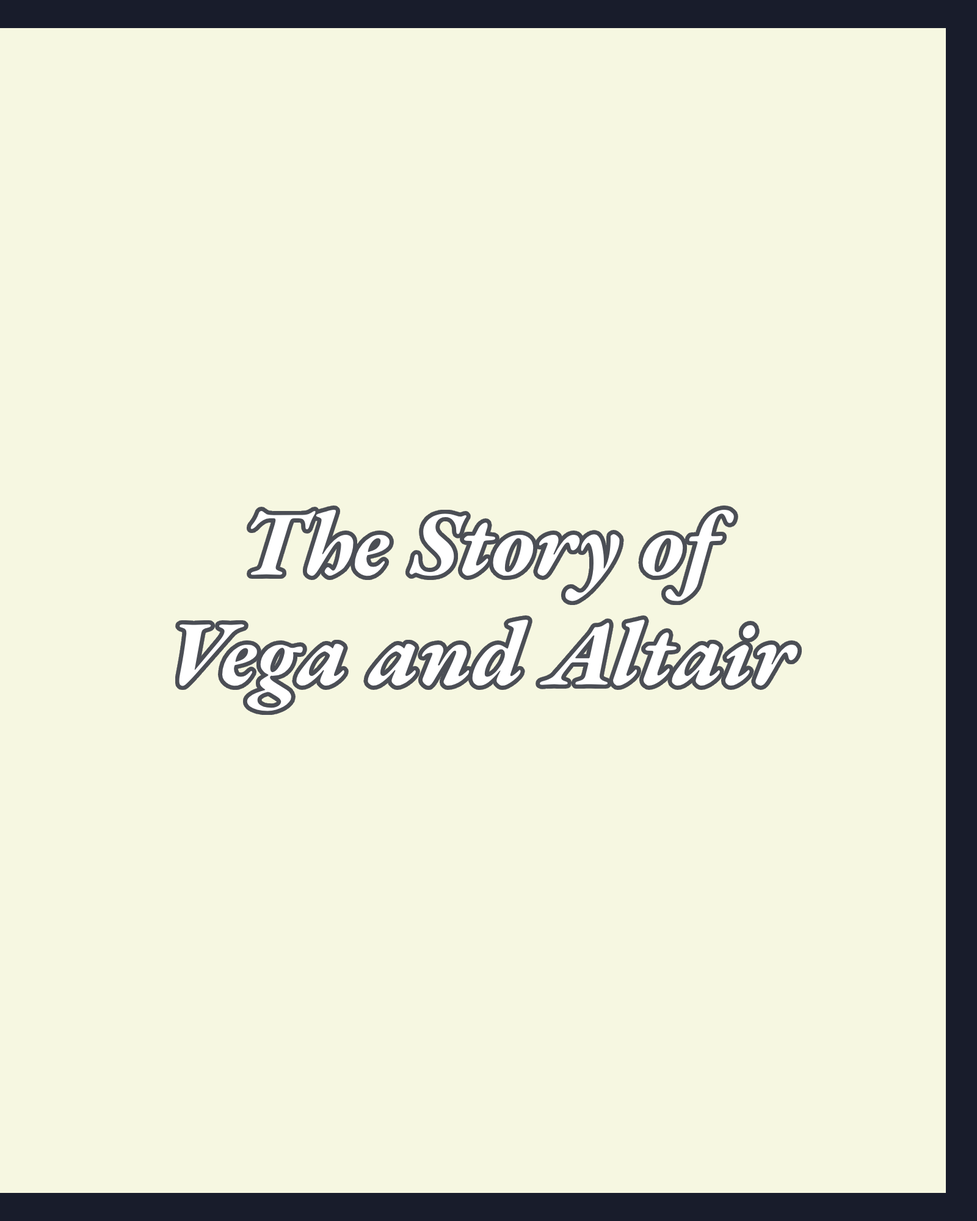
<style>
.page{position:relative;width:977px;height:1221px;background:#f6f7e1}
.page>*{position:absolute;margin:0}
.t1{font:91.6px "EBGaramondItalic-Bold";color:#ffffff}
</style>
<div class="page">
<p class="t1" style="left:178px;top:509px;width:620px;height:202px;text-align:center">The Story of<br>Vega and Altair</p>
</div>
